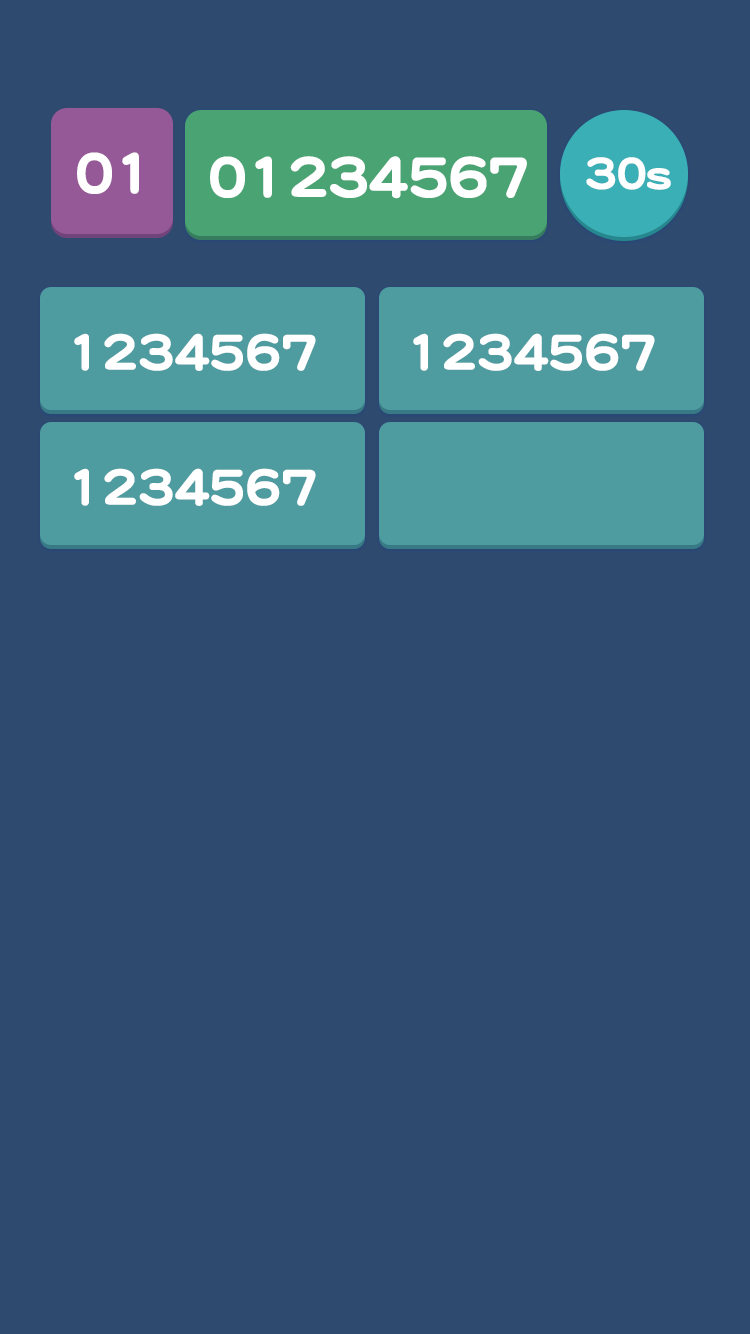
<style>
.page{position:relative;width:750px;height:1334px;background:#2f4a6f}
.page>*{position:absolute;margin:0}
.t1{font:60px "DFPYuanW9";letter-spacing:-0.05em;color:#ffffff}
.t2{font:46.7px "DFPYuanW9";letter-spacing:-0.05em;color:#ffffff}
.t3{font:53.3px "DFPYuanW9";letter-spacing:-0.05em;color:#ffffff}
</style>
<div class="page">
<p class="t1" style="left:77px;top:152px;width:62px;height:42px">01</p>
<p class="t1" style="left:210px;top:156px;width:317px;height:43px">01234567</p>
<p class="t2" style="left:586px;top:157px;width:85px;height:33px">30s</p>
<p class="t3" style="left:74px;top:333px;width:242px;height:38px">1234567</p>
<p class="t3" style="left:413px;top:333px;width:242px;height:38px">1234567</p>
<p class="t3" style="left:74px;top:468px;width:242px;height:38px">1234567</p>
</div>
